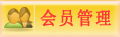
<style>
.page{position:relative;width:120px;height:37px}
.page>*{position:absolute;margin:0}
.t1{font:18px "SimSun";letter-spacing:0.1em;color:#f93939;font-weight:bold;scale:0.9 1}
</style>
<div class="page">
<p class="t1" style="left:40px;top:9px;width:71px;height:18px">会员管理</p>
</div>
